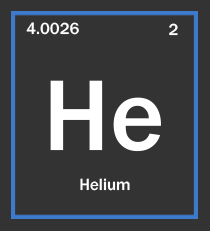
<style>
.page{position:relative;width:210px;height:231px;background:#333333}
.page>*{position:absolute;margin:0}
.t1{font:16.8px "FranklinGothic-Medium";color:#ffffff}
.t2{font:104.2px "FranklinGothic-Medium";color:#ffffff}
</style>
<div class="page">
<p class="t1" style="left:26px;top:22px;width:53px;height:13px">4.0026</p>
<p class="t1" style="left:169px;top:23px;width:9px;height:13px">2</p>
<p class="t2" style="left:50px;top:80px;width:111px;height:72px">He</p>
<p class="t1" style="left:80px;top:178px;width:50px;height:13px">Helium</p>
</div>
